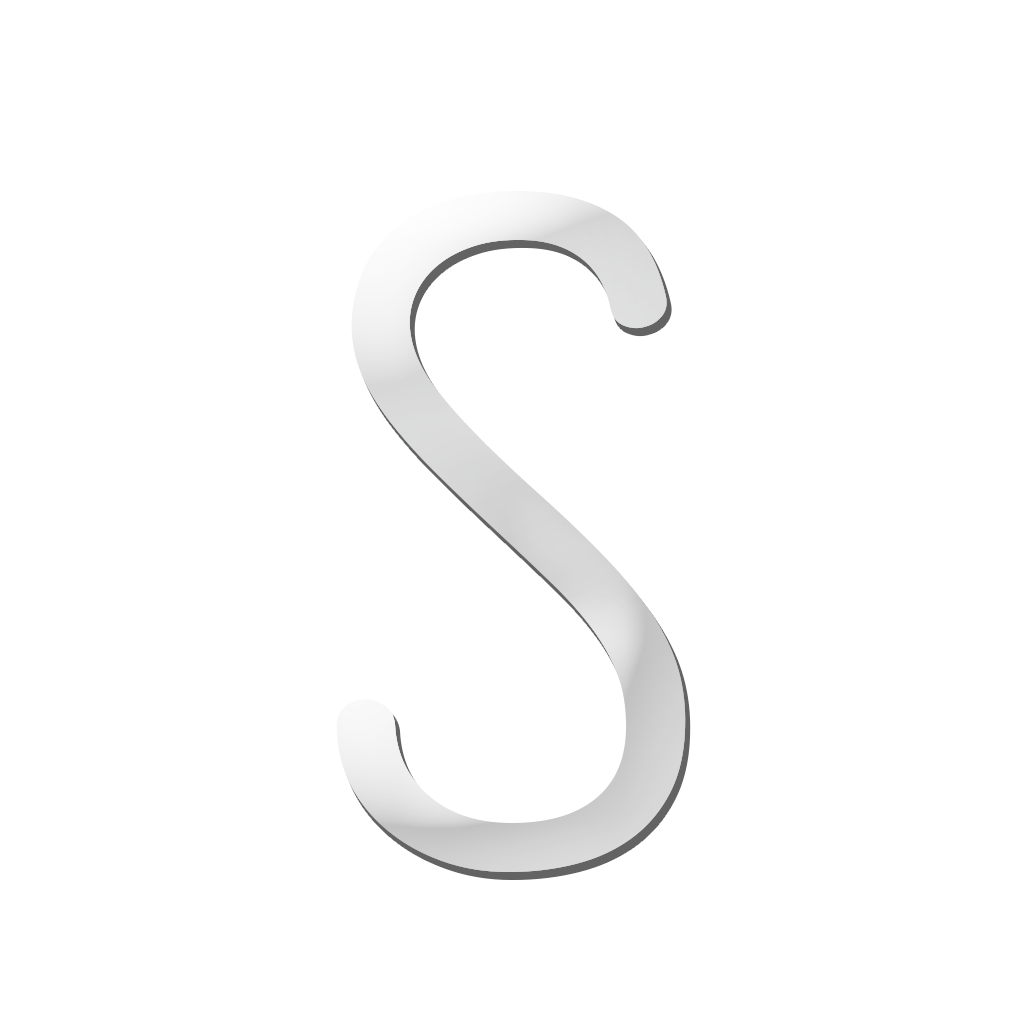
<style>
.page{position:relative;width:1024px;height:1024px;background:#ffffff}
.page>*{position:absolute;margin:0}
.t1{font:857px "NanumBarunpen";color:#d9d9d9;scale:1.07 1}
</style>
<div class="page">
<p class="t1" style="left:336px;top:191px;width:350px;height:681px">S</p>
</div>
